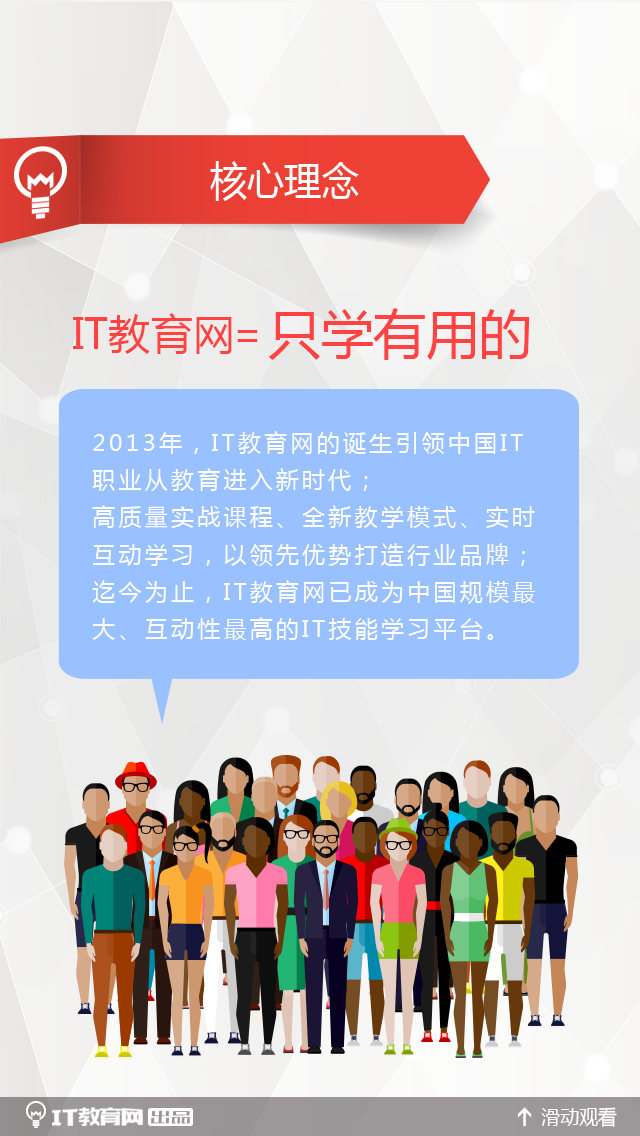
<style>
.page{position:relative;width:640px;height:1136px}
.page>*{position:absolute;margin:0}
.t1{font:40px "MicrosoftYaHei";color:#ffffff;scale:0.93 1}
.t2{font:42.2px "MicrosoftYaHei";color:#ff4343}
.t3{font:52.7px "MicrosoftYaHei";color:#ff4343}
.t4{font:39.2px "MicrosoftYaHei";color:#ff4343}
.t5{font:23px/37.3px "MicrosoftYaHei";letter-spacing:0.14em;color:#ffffff}
.t6{font:20.2px "MicrosoftYaHei";color:#ffffff;scale:0.94 1}
</style>
<div class="page">
<p class="t1" style="left:210px;top:161px;width:149px;height:40px">核心理念</p>
<p class="t2" style="left:73px;top:313px;width:159px;height:41px">IT教育网</p>
<p class="t3" style="left:268px;top:308px;width:262px;height:52px">只学有用的</p>
<p class="t4" style="left:237px;top:330px;width:21px;height:12px">=</p>
<p class="t5" style="left:92px;top:431px;width:443px;height:209px">2013年，IT教育网的诞生引领中国IT<br>职业从教育进入新时代；<br>高质量实战课程、全新教学模式、实时<br>互动学习，以领先优势打造行业品牌；<br>迄今为止，IT教育网已成为中国规模最<br>大、互动性最高的IT技能学习平台。</p>
<p class="t6" style="left:541px;top:1107px;width:76px;height:20px">滑动观看</p>
</div>
